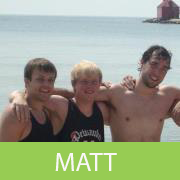
<style>
.page{position:relative;width:180px;height:180px;background:#97cc53}
.page>*{position:absolute;margin:0}
.t1{font:26.7px "MyriadPro-Regular";color:#faf7f7}
</style>
<div class="page">
<p class="t1" style="left:55px;top:153px;width:62px;height:18px">MATT</p>
</div>
